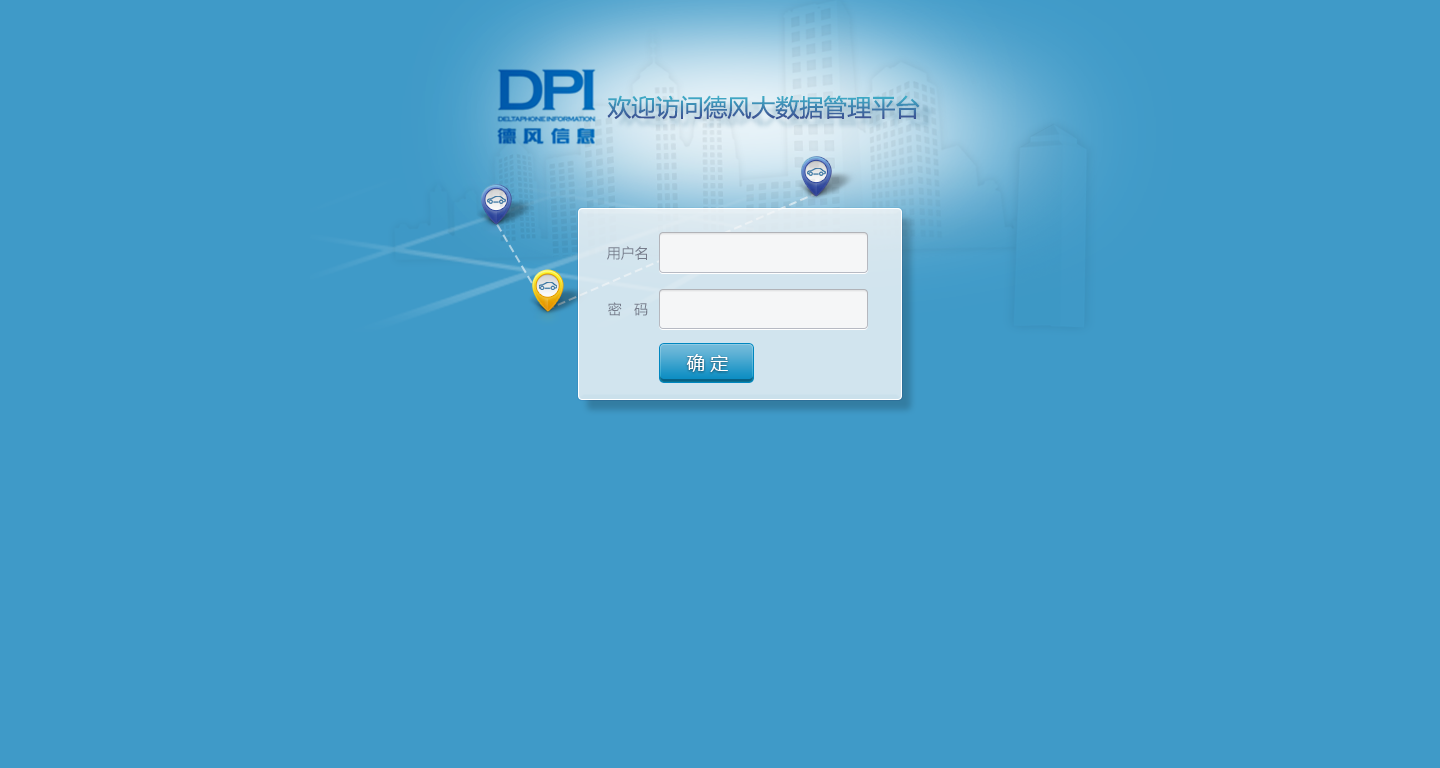
<style>
.page{position:relative;width:1440px;height:768px;background:#3f9ac8}
.page>*{position:absolute;margin:0}
.t1{font:24px "MicrosoftYaHei"}
.t2{font:14px "MicrosoftYaHei";color:#767c8b}
.t3{font:18px "MicrosoftYaHei";color:#ffffff;text-transform:uppercase}
</style>
<div class="page">
<p class="t1" style="left:607px;top:95px;width:313px;height:25px">欢迎访问德风大数据管理平台</p>
<p class="t2" style="left:607px;top:246px;width:40px;height:14px">用户名</p>
<p class="t2" style="left:608px;top:302px;width:40px;height:14px">密   码</p>
<p class="t3" style="left:686px;top:354px;width:42px;height:18px">确 定</p>
</div>
